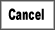
<style>
.page{position:relative;width:55px;height:30px;background:#ffffff}
.page>*{position:absolute;margin:0}
.t1{font:26.5px "Arial-Black";color:#000000;scale:0.62 1}
</style>
<div class="page">
<p class="t1" style="left:8px;top:8px;width:36px;height:12px">Cancel</p>
</div>
